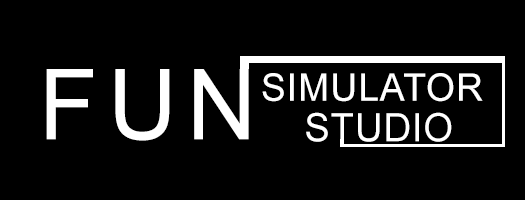
<style>
.page{position:relative;width:525px;height:200px;background:#000000}
.page>*{position:absolute;margin:0}
.t1{font:97.9px "ArialMT";letter-spacing:0.105em;color:#ffffff;text-transform:uppercase}
.t2{font:38px "ArialMT";letter-spacing:0.025em;color:#ffffff;text-transform:uppercase}
.t3{font:38.9px "ArialMT";letter-spacing:0.025em;color:#ffffff;text-transform:uppercase}
</style>
<div class="page">
<p class="t1" style="left:46px;top:69px;width:203px;height:72px">Fun</p>
<p class="t2" style="left:262px;top:73px;width:221px;height:29px">Simulator</p>
<p class="t3" style="left:306px;top:112px;width:146px;height:30px">Studio</p>
</div>
